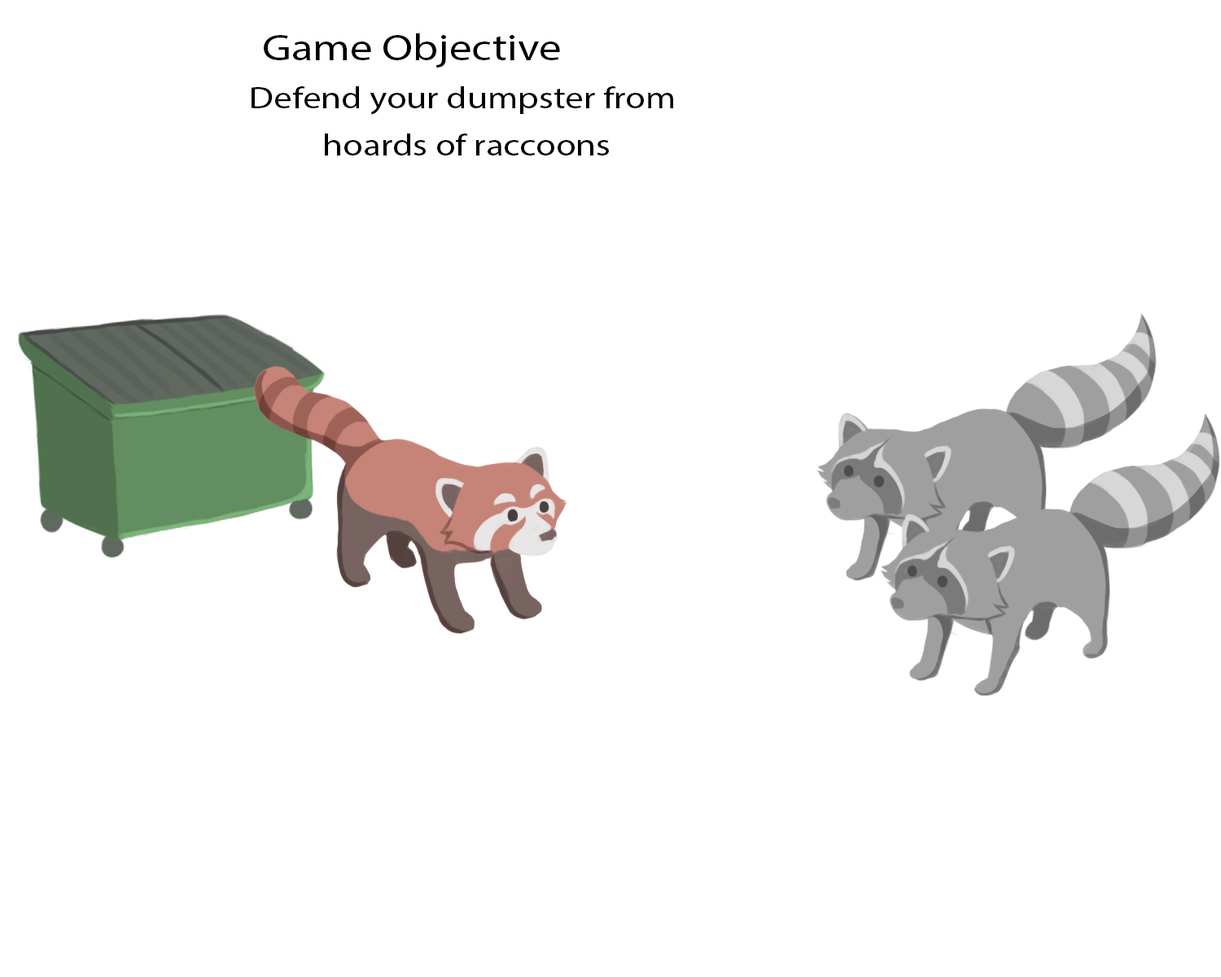
<style>
.page{position:relative;width:1221px;height:977px;background:#ffffff}
.page>*{position:absolute;margin:0}
.t1{font:37.3px "MyriadPro-Regular";color:#000000;scale:1.2 1}
.t2{font:30.5px/47.5px "MyriadPro-Regular";color:#000000;scale:1.2 1}
</style>
<div class="page">
<p class="t1" style="left:264px;top:33px;width:296px;height:35px">Game Objective</p>
<p class="t2" style="left:252px;top:86px;width:421px;height:69px;text-align:center">Defend your dumpster from<br> hoards of raccoons</p>
</div>
